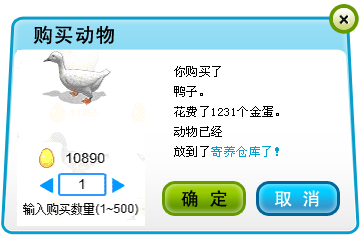
<style>
.page{position:relative;width:361px;height:250px;background:#ffffff}
.page>*{position:absolute;margin:0}
.t1{font:20px "SimHei";letter-spacing:0.04em;color:#000000}
.t2{font:12px/20px "SimSun";letter-spacing:0.04em;color:#000000}
.t3{font:12px/20px "SimSun";letter-spacing:0.04em;color:#089dcb}
.t4{font:18px "SimHei";letter-spacing:0.04em;color:#000000}
.t5{font:18px "SimHei";letter-spacing:0.04em;color:#ffffff}
</style>
<div class="page">
<p class="t1" style="left:33px;top:25px;width:81px;height:20px">购买动物</p>
<p class="t2" style="left:174px;top:66px;width:105px;height:91px">你购买了<br>鸭子。<br>花费了1231个金蛋。<br>动物已经<br>放到了<span class="t3">寄养仓库了！</span></p>
<p class="t4" style="left:181px;top:190px;width:46px;height:17px">确 定</p>
<p class="t5" style="left:275px;top:190px;width:45px;height:17px">取 消</p>
</div>
